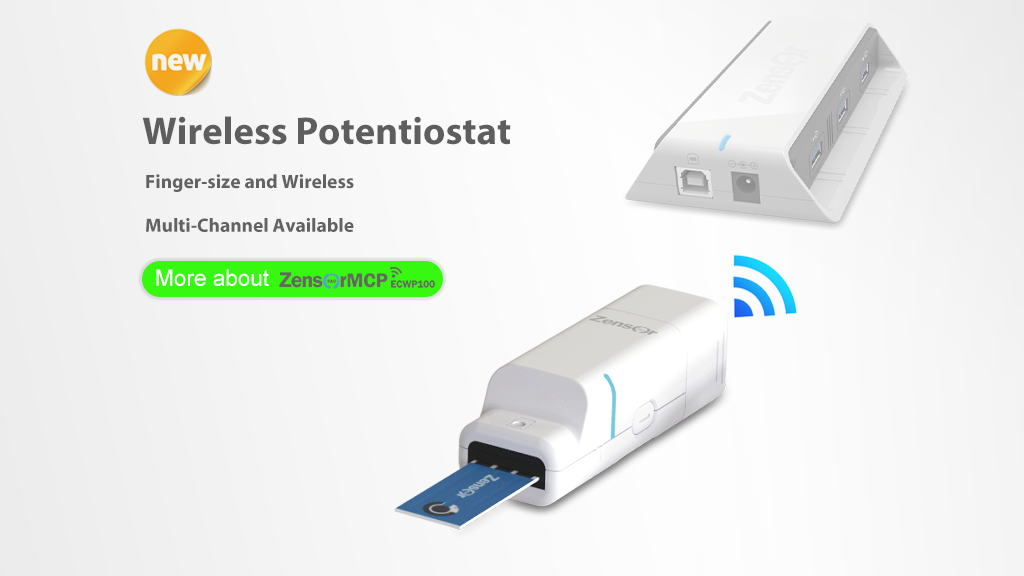
<style>
.page{position:relative;width:1024px;height:576px}
.page>*{position:absolute;margin:0}
.t1{font:38.9px "MyriadPro-Bold";color:#5e5e5e}
.t2{font:19.4px/43.7px "MyriadPro-Bold";color:#626262}
.t3{font:19.4px/43.7px "MyriadPro-Regular";color:#626262}
.t4{font:22.5px "ArialMT";color:#ffffff}
</style>
<div class="page">
<p class="t1" style="left:142px;top:116px;width:369px;height:29px">Wireless Potentiostat</p>
<p class="t2" style="left:146px;top:174px;width:208px;height:58px"><span class="t3"><br></span>Finger-size and Wireless<br>Multi-Channel Available</p>
<p class="t4" style="left:156px;top:269px;width:113px;height:17px">More about</p>
</div>
